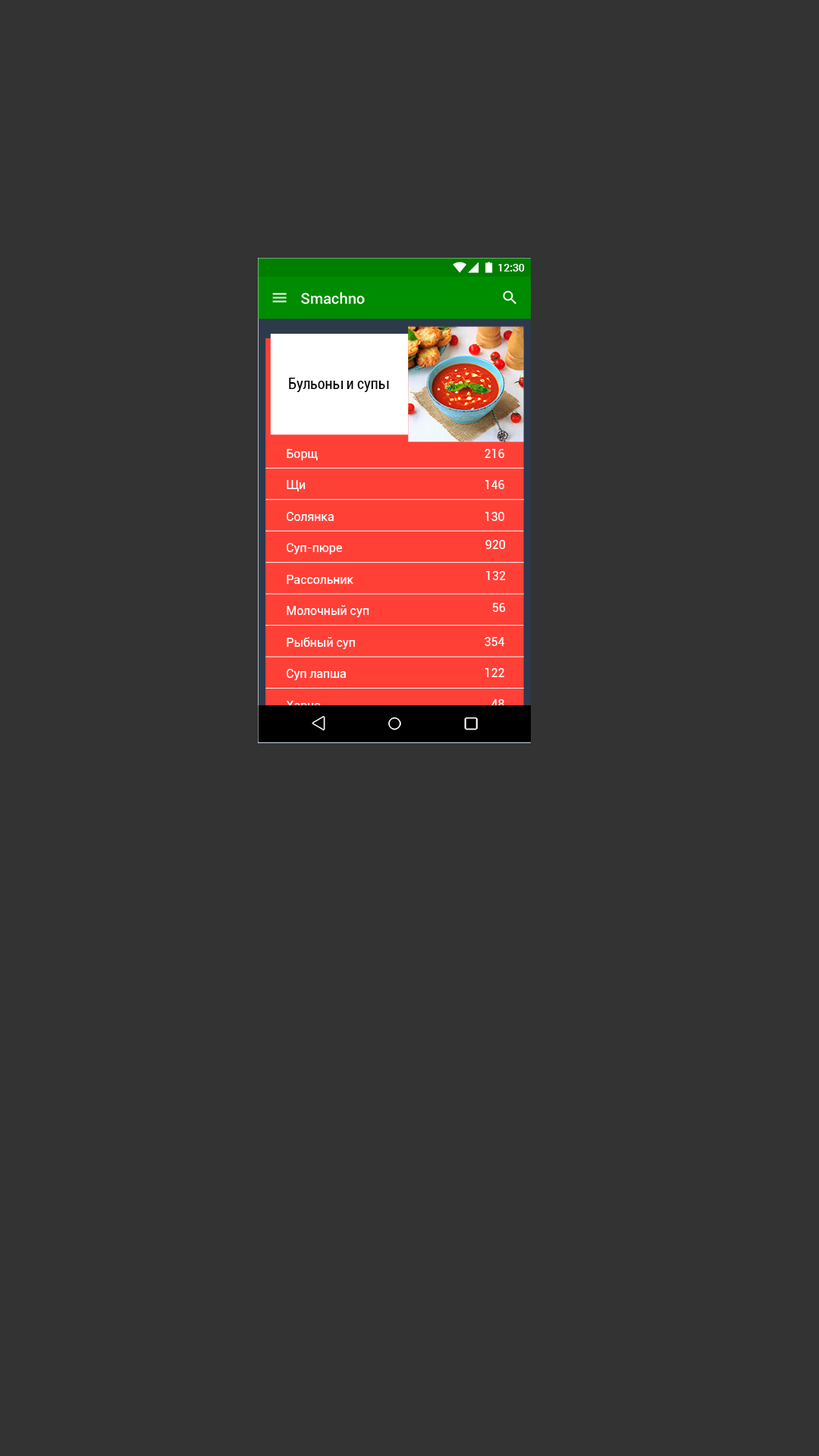
<style>
.page{position:relative;width:819px;height:1456px;background:#333333}
.page>*{position:absolute;margin:0}
.t1{font:10.6px "Roboto-Medium";color:#ffffff}
.t2{font:15.1px "Roboto-Medium";color:#ffffff}
.t3{font:15.1px "Roboto-Condensed";color:#000000}
.t4{font:12.1px "Roboto-Regular";color:#ffffff}
.t5{font:12.1px "Roboto-Regular"}
</style>
<div class="page">
<p class="t1" style="left:498px;top:264px;width:27px;height:7px">12:30</p>
<p class="t2" style="left:301px;top:292px;width:64px;height:12px">Smachno</p>
<p class="t3" style="left:289px;top:378px;width:100px;height:14px">Бульоны и супы</p>
<p class="t4" style="left:287px;top:449px;width:31px;height:11px">Борщ</p>
<p class="t4" style="left:485px;top:449px;width:19px;height:9px">216</p>
<p class="t4" style="left:287px;top:480px;width:19px;height:11px">Щи</p>
<p class="t4" style="left:485px;top:480px;width:19px;height:9px">146</p>
<p class="t4" style="left:287px;top:512px;width:47px;height:9px">Солянка</p>
<p class="t4" style="left:485px;top:512px;width:19px;height:9px">130</p>
<p class="t4" style="left:287px;top:543px;width:55px;height:11px">Суп-пюре</p>
<p class="t4" style="left:485px;top:540px;width:20px;height:9px">920</p>
<p class="t4" style="left:287px;top:575px;width:66px;height:9px">Рассольник</p>
<p class="t4" style="left:486px;top:571px;width:20px;height:9px">132</p>
<p class="t4" style="left:287px;top:605px;width:82px;height:12px">Молочный суп</p>
<p class="t4" style="left:492px;top:603px;width:14px;height:9px">56</p>
<p class="t4" style="left:287px;top:637px;width:68px;height:12px">Рыбный суп</p>
<p class="t4" style="left:485px;top:637px;width:20px;height:9px">354</p>
<p class="t4" style="left:287px;top:669px;width:59px;height:11px">Суп лапша</p>
<p class="t4" style="left:485px;top:668px;width:19px;height:9px">122</p>
<p class="t5" style="left:286px;top:701px;width:35px;height:11px">Харчо</p>
<p class="t4" style="left:491px;top:699px;width:13px;height:9px">48</p>
</div>
